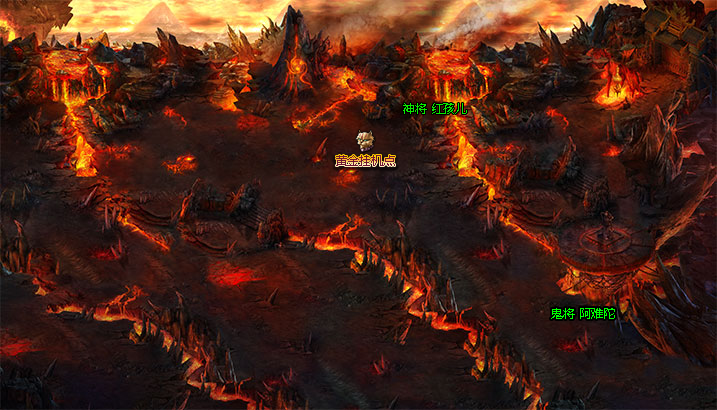
<style>
.page{position:relative;width:717px;height:410px}
.page>*{position:absolute;margin:0}
.t1{font:12px "MicrosoftYaHei";color:#0bea00}
.t2{font:12px "MicrosoftYaHei";color:#701633}
.t3{font:12px "MicrosoftYaHei";color:#00ff00}
</style>
<div class="page">
<p class="t1" style="left:403px;top:103px;width:64px;height:11px">神将 红孩儿</p>
<p class="t2" style="left:336px;top:155px;width:59px;height:11px">黄金挂机点</p>
<p class="t3" style="left:551px;top:308px;width:64px;height:11px">鬼将 阿难陀</p>
</div>
